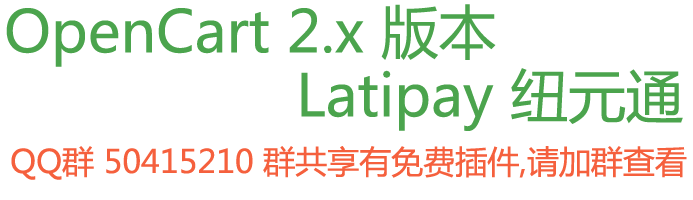
<style>
.page{position:relative;width:693px;height:200px;background:#ffffff}
.page>*{position:absolute;margin:0}
.t1{font:57.5px "MicrosoftYaHei";color:#4ba44d}
.t2{font:32px "MicrosoftYaHei";color:#f5603d}
</style>
<div class="page">
<p class="t1" style="left:6px;top:4px;width:490px;height:63px">OpenCart 2.x 版本</p>
<p class="t1" style="left:301px;top:68px;width:382px;height:63px">Latipay 纽元通</p>
<p class="t2" style="left:11px;top:146px;width:676px;height:34px">QQ群 50415210 群共享有免费插件,请加群查看</p>
</div>
